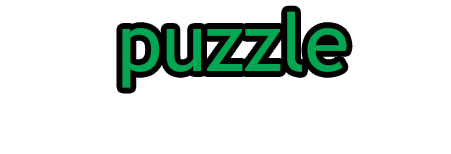
<style>
.page{position:relative;width:451px;height:154px;background:#ffffff}
.page>*{position:absolute;margin:0}
.t1{font:80px "TrebuchetMS";color:#00a651}
</style>
<div class="page">
<p class="t1" style="left:122px;top:11px;width:225px;height:77px">puzzle</p>
</div>
